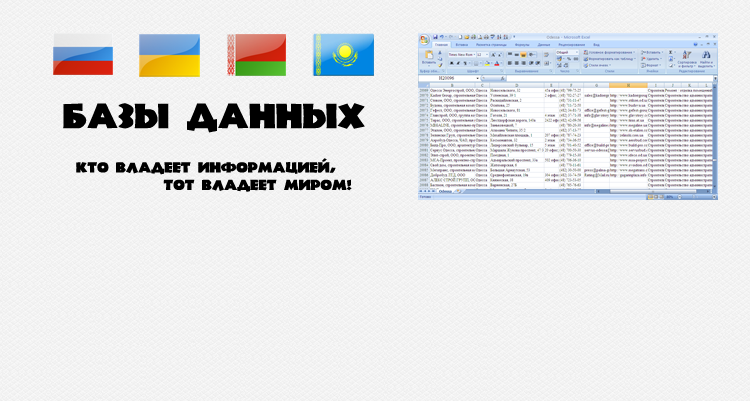
<style>
.page{position:relative;width:750px;height:401px}
.page>*{position:absolute;margin:0}
.t1{font:35px "NewlandBlack";color:#000000}
.t2{font:14.6px "NewlandBlack";color:#000000}
</style>
<div class="page">
<p class="t1" style="left:63px;top:103px;width:302px;height:30px">Базы данных</p>
<p class="t2" style="left:76px;top:158px;width:276px;height:34px">Кто владеет информацией,<br>            тот владеет миром!</p>
</div>
